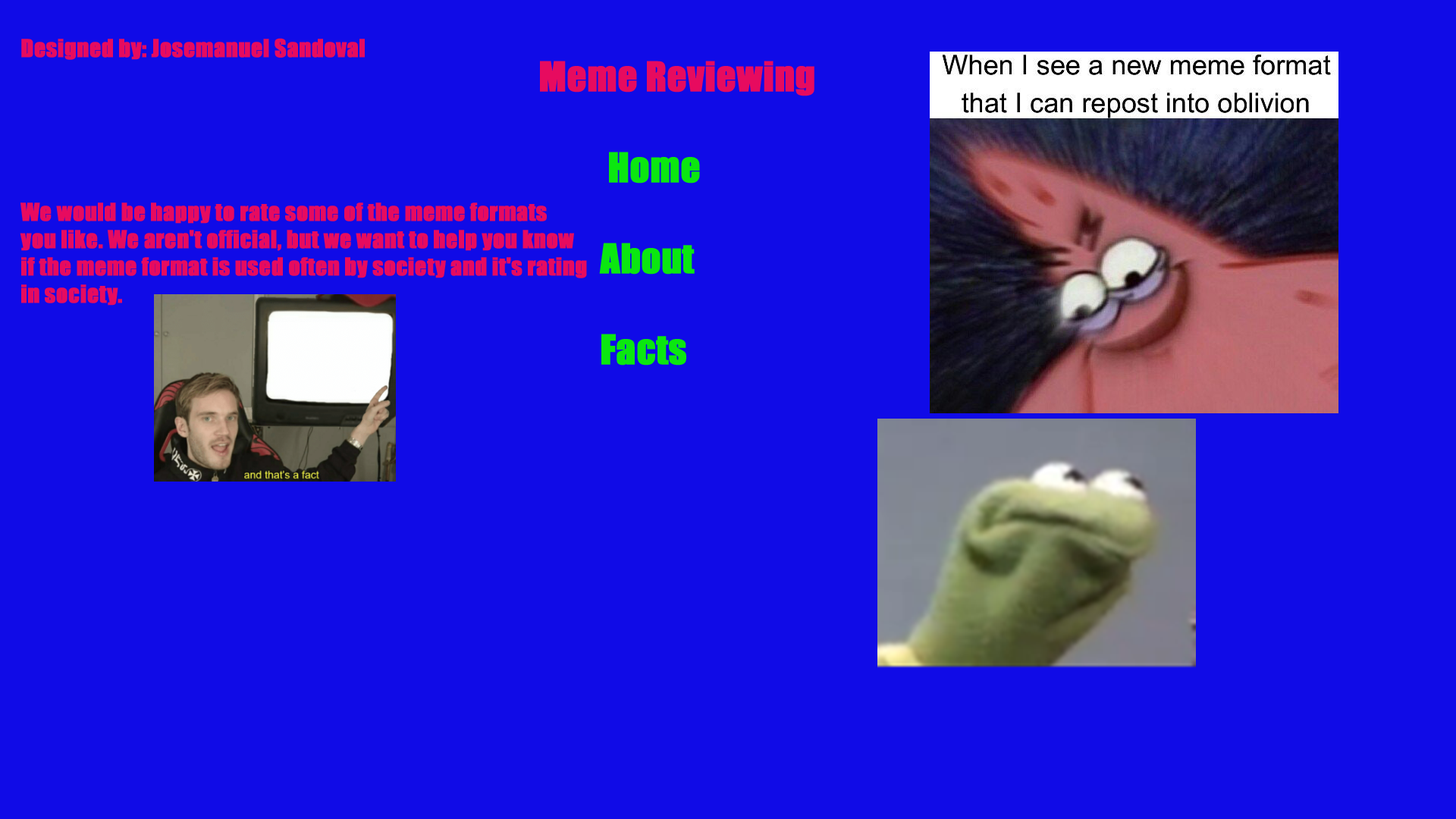
<style>
.page{position:relative;width:1456px;height:819px;background:#100be7}
.page>*{position:absolute;margin:0}
.t1{font:22.7px "Impact";color:#e70b5f;font-weight:bold}
.t2{font:37.9px "Impact";color:#0be710;font-weight:bold}
.t3{font:37.9px "Impact";color:#e70b5f;font-weight:bold}
</style>
<div class="page">
<p class="t1" style="left:20px;top:38px;width:567px;height:268px">Designed by: Josemanuel Sandoval<br><br><br><br><br><br>We would be happy to rate some of the meme formats<br>you like. We aren't official, but we want to help you know<br>if the meme format is used often by society and it's rating<br>in society.</p>
<p class="t2" style="left:540px;top:61px;width:274px;height:305px"><span class="t3">                            Meme Reviewing<br><br>                                     </span>Home<br><br>                                    About<br><br>                                    Facts</p>
</div>
